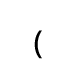
<style>
.page{position:relative;width:80px;height:80px;background:#ffffff}
.page>*{position:absolute;margin:0}
.t1{font:31.8px "DroidSans";color:#000000}
</style>
<div class="page">
<p class="t1" style="left:34px;top:30px;width:8px;height:29px">(</p>
</div>
